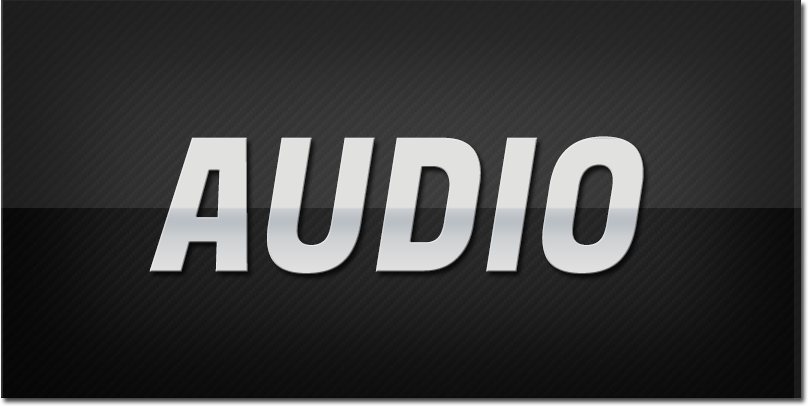
<style>
.page{position:relative;width:808px;height:406px}
.page>*{position:absolute;margin:0}
.t1{font:185.2px "FugazOne-Regular";color:#dfdfdf;scale:0.89 1}
</style>
<div class="page">
<p class="t1" style="left:149px;top:136px;width:495px;height:138px">AUDIO</p>
</div>
